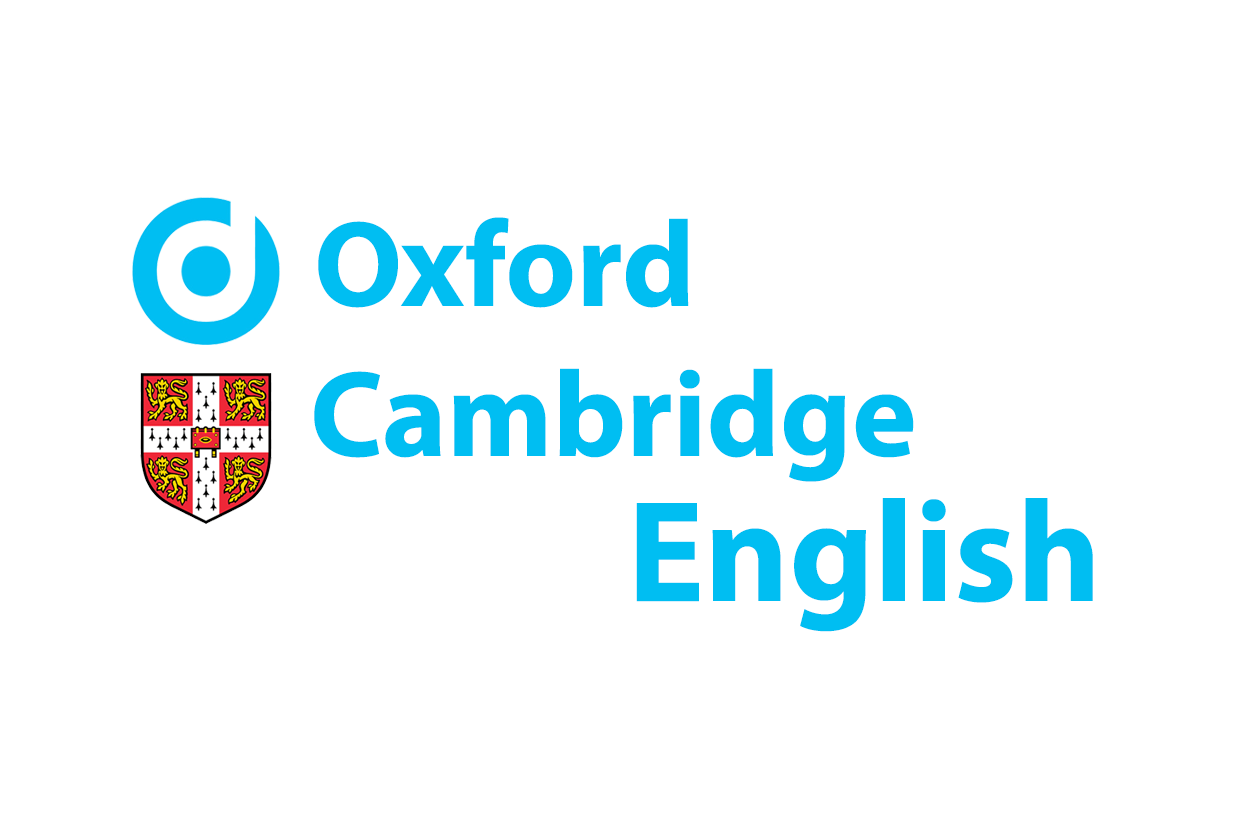
<style>
.page{position:relative;width:1242px;height:828px;background:#ffffff}
.page>*{position:absolute;margin:0}
.t1{font:123px "MyriadPro-Bold";color:#00bef2}
.t2{font:145px "MyriadPro-Bold";color:#00bef2}
</style>
<div class="page">
<p class="t1" style="left:318px;top:217px;width:371px;height:91px">Oxford</p>
<p class="t1" style="left:314px;top:368px;width:600px;height:114px">Cambridge</p>
<p class="t2" style="left:636px;top:498px;width:457px;height:134px">English</p>
</div>
